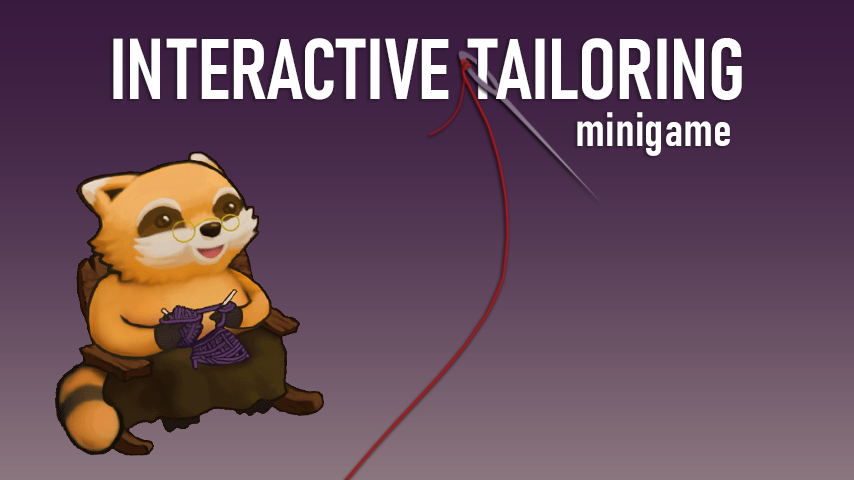
<style>
.page{position:relative;width:854px;height:480px}
.page>*{position:absolute;margin:0}
.t1{font:85px "Bahnschrift-SemiBoldCondensed";color:#ffffff;font-weight:bold}
.t2{font:48px "Bahnschrift-SemiBoldCondensed";color:#ffffff;font-weight:bold}
</style>
<div class="page">
<p class="t1" style="left:113px;top:38px;width:629px;height:62px">INTERACTIVE TAILORING</p>
<p class="t2" style="left:577px;top:112px;width:153px;height:44px">minigame</p>
</div>
